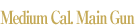
<style>
.page{position:relative;width:135px;height:27px;background:#ffffff}
.page>*{position:absolute;margin:0}
.t1{font:18px "RyuminPro-ExBold";letter-spacing:-0.1em;color:#c4a956;scale:0.82 1}
</style>
<div class="page">
<p class="t1" style="left:0px;top:10px;width:135px;height:15px">Medium Cal. Main Gun</p>
</div>
